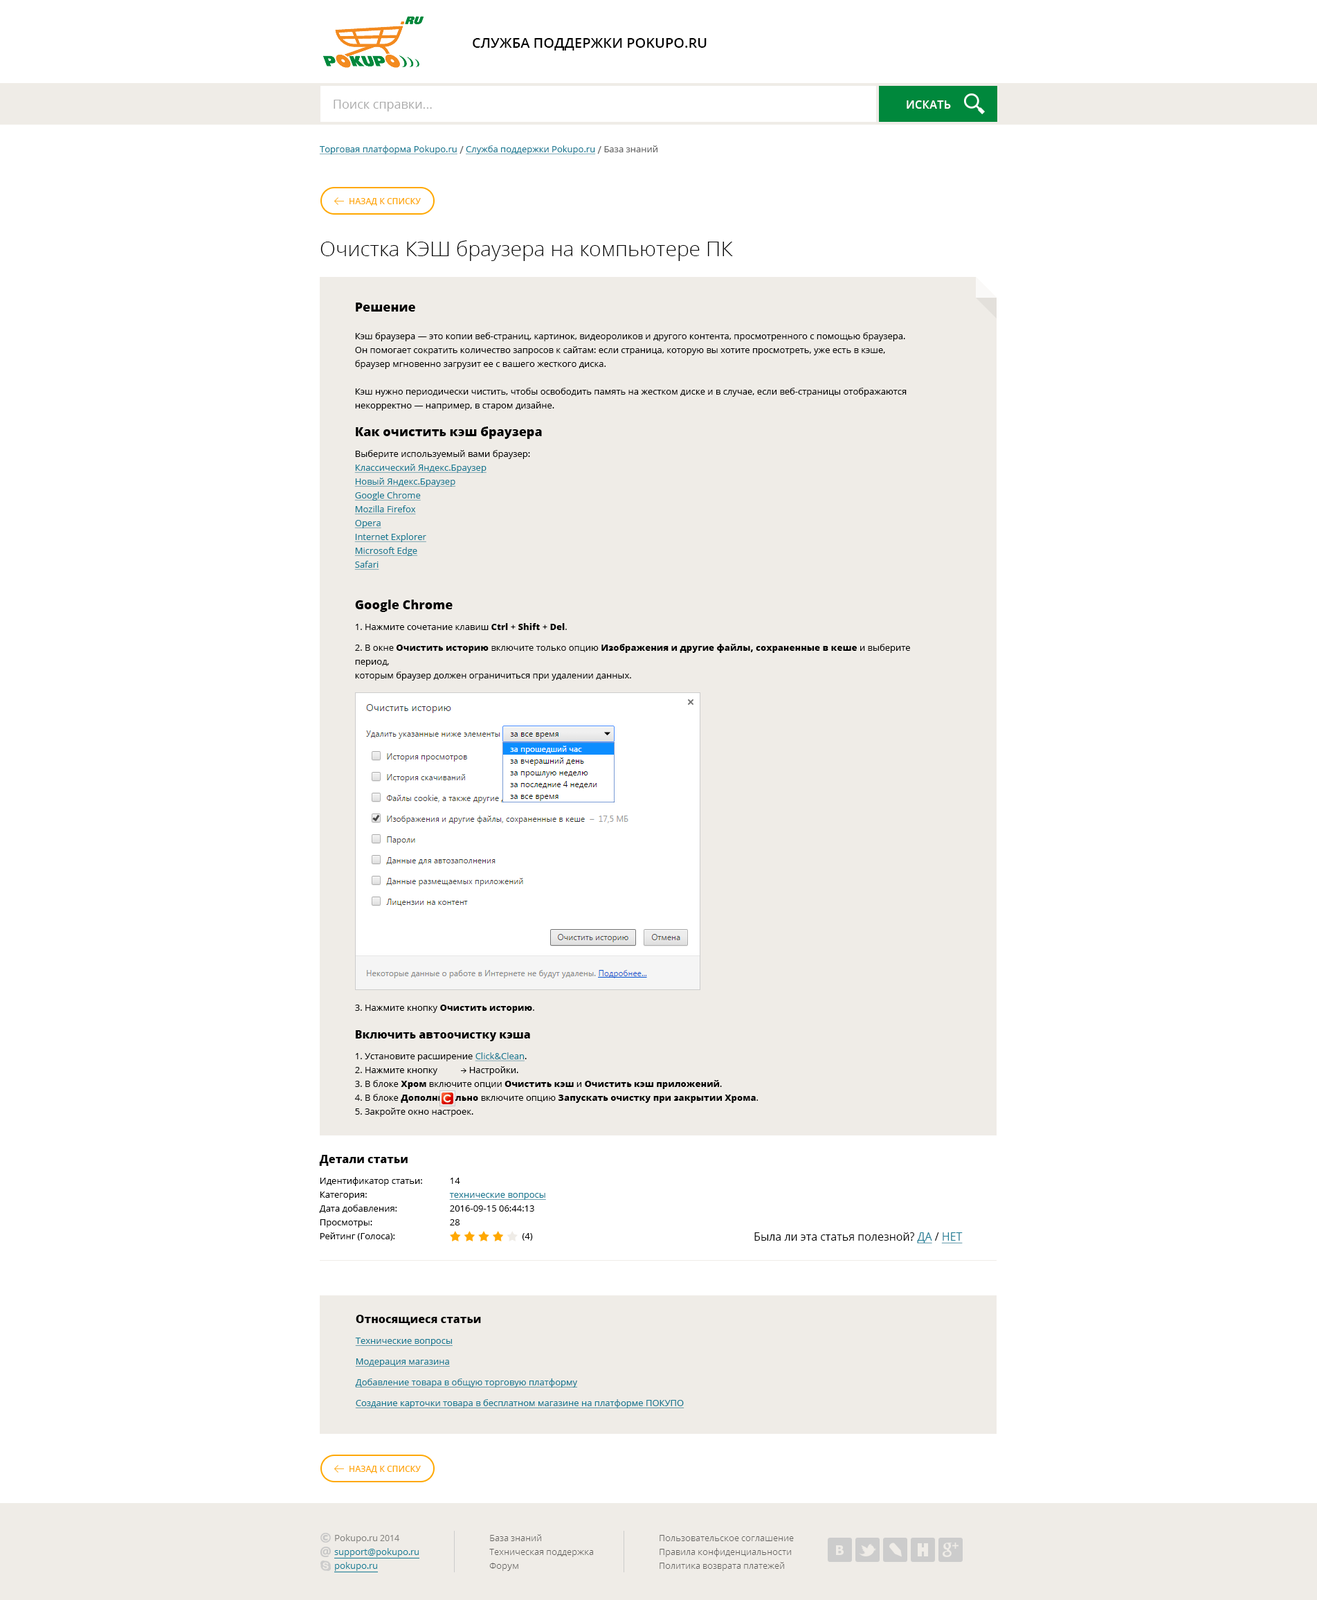
<style>
.page{position:relative;width:1317px;height:1600px;background:#ffffff}
.page>*{position:absolute;margin:0}
.t1{font:13.8px "OpenSans-Semibold";color:#000000;text-transform:uppercase}
.t2{font:12.5px "OpenSans";color:#adadad}
.t3{font:11.1px "OpenSans-Semibold";letter-spacing:0.025em;color:#ffffff;text-transform:uppercase}
.t4{font:9px "OpenSans";color:#177a93;text-decoration:underline}
.t5{font:10.4px "OpenSans";color:#666666}
.t6{font:9px "OpenSans";color:#666666}
.t7{font:8.3px "OpenSans-Semibold";color:#ffa800;text-transform:uppercase}
.t8{font:20.8px "OpenSans-Light";color:#000000}
.t9{font:9px/13.8px "OpenSans";color:#000000}
.t10{font:12.5px/13.8px "OpenSans-Extrabold";color:#000000}
.t11{font:9px/13.8px "OpenSans";color:#177a93;text-decoration:underline}
.t12{font:9px/13.8px "OpenSans-Extrabold";color:#000000}
.t13{font:11.1px/13.8px "OpenSans-Extrabold";color:#000000}
.t14{font:9px/13.8px "MinionPro-Regular";color:#000000}
.t15{font:11.1px "OpenSans";color:#000000}
.t16{font:11.1px "OpenSans";color:#177a93;text-decoration:underline}
</style>
<div class="page">
<p class="t1" style="left:473px;top:38px;width:234px;height:13px">Служба поддержки Pokupo.ru</p>
<p class="t2" style="left:334px;top:100px;width:98px;height:11px">Поиск справки...</p>
<p class="t3" style="left:907px;top:100px;width:44px;height:9px">искать</p>
<p class="t4" style="left:319px;top:145px;width:339px;height:9px">Торговая платформа Pokupo.ru <span class="t5">/ </span>Служба поддержки Pokupo.ru <span class="t5">/</span><span class="t6"> База знаний</span></p>
<p class="t7" style="left:350px;top:198px;width:71px;height:8px">назад к списку</p>
<p class="t8" style="left:321px;top:240px;width:412px;height:21px">Очистка КЭШ браузера на компьютере ПК</p>
<p class="t9" style="left:354px;top:303px;width:556px;height:814px"><span class="t10">Решение<br><br></span>Кэш браузера — это копии веб-страниц, картинок, видеороликов и другого контента, просмотренного с помощью браузера. Он помогает сократить количество запросов к сайтам: если страница, которую вы хотите просмотреть, уже есть в кэше, браузер мгновенно загрузит ее с вашего жесткого диска.<br> <br>Кэш нужно периодически чистить, чтобы освободить память на жестком диске и в случае, если веб-страницы отображаются некорректно — например, в старом дизайне.<br><br><span class="t10">Как очистить кэш браузера<br></span>Выберите используемый вами браузер:<br><span class="t11">Классический Яндекс.Браузер<br>Новый Яндекс.Браузер<br>Google Chrome<br>Mozilla Firefox<br>Opera<br>Internet Explorer<br>Microsoft Edge<br>Safari<br><br></span><span class="t10"><br>Google Chrome<br></span>1. Нажмите сочетание клавиш <span class="t12">Ctrl</span> + <span class="t12">Shift</span> + <span class="t12">Del</span>.<br>2. В окне <span class="t12">Очистить историю</span> включите только опцию <span class="t12">Изображения и другие файлы, сохраненные в кеше</span> и выберите период, <br>которым браузер должен ограничиться при удалении данных.<br> <br><br><br><br><br><br><br><br><br><br><br><br><br><br><br><br><br><br><br><br><br><br>3. Нажмите кнопку <span class="t12">Очистить историю</span>.<br><br><span class="t13">Включить автоочистку кэша<br></span>1. Установите расширение <span class="t11">Click&amp;Clean</span>.<br>2. Нажмите кнопку          <span class="t14">→</span> Настройки.<br>3. В блоке <span class="t12">Хром</span> включите опции <span class="t12">Очистить кэш</span> и <span class="t12">Очистить кэш приложений</span>.<br>4. В блоке <span class="t12">Дополнительно</span> включите опцию <span class="t12">Запускать очистку при закрытии Хрома</span>.<br>5. Закройте окно настроек.</p>
<p class="t9" style="left:319px;top:1155px;width:103px;height:86px"><span class="t13">Детали статьи<br></span>Идентификатор статьи:<br>Категория:<br>Дата добавления:<br>Просмотры:<br>Рейтинг (Голоса):</p>
<p class="t9" style="left:449px;top:1178px;width:97px;height:63px">14<br><span class="t11">технические вопросы<br></span>2016-09-15 06:44:13<br>28<br>                               (4)</p>
<p class="t15" style="left:755px;top:1232px;width:208px;height:11px">Была ли эта статья полезной? <span class="t16">ДА</span> / <span class="t16">НЕТ</span></p>
<p class="t11" style="left:355px;top:1315px;width:330px;height:93px"><span class="t13">Относящиеся статьи<br></span>Технические вопросы<br>Модерация магазина<br>Добавление товара в общую торговую платформу<br>Создание карточки товара в бесплатном магазине на платформе ПОКУПО</p>
<p class="t7" style="left:350px;top:1466px;width:71px;height:7px">назад к списку</p>
</div>
